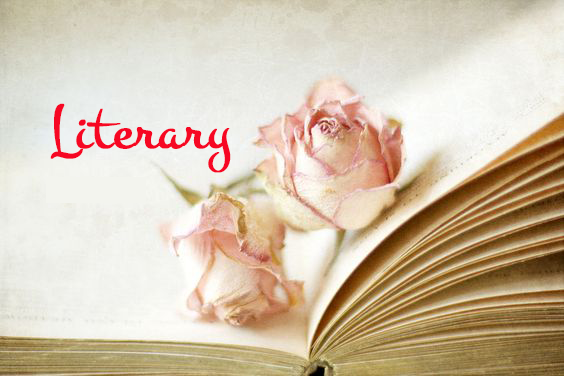
<style>
.page{position:relative;width:564px;height:376px}
.page>*{position:absolute;margin:0}
.t1{font:65px "Montez-Regular";color:#f60723;font-weight:bold}
</style>
<div class="page">
<p class="t1" style="left:50px;top:103px;width:181px;height:70px">Literary</p>
</div>
